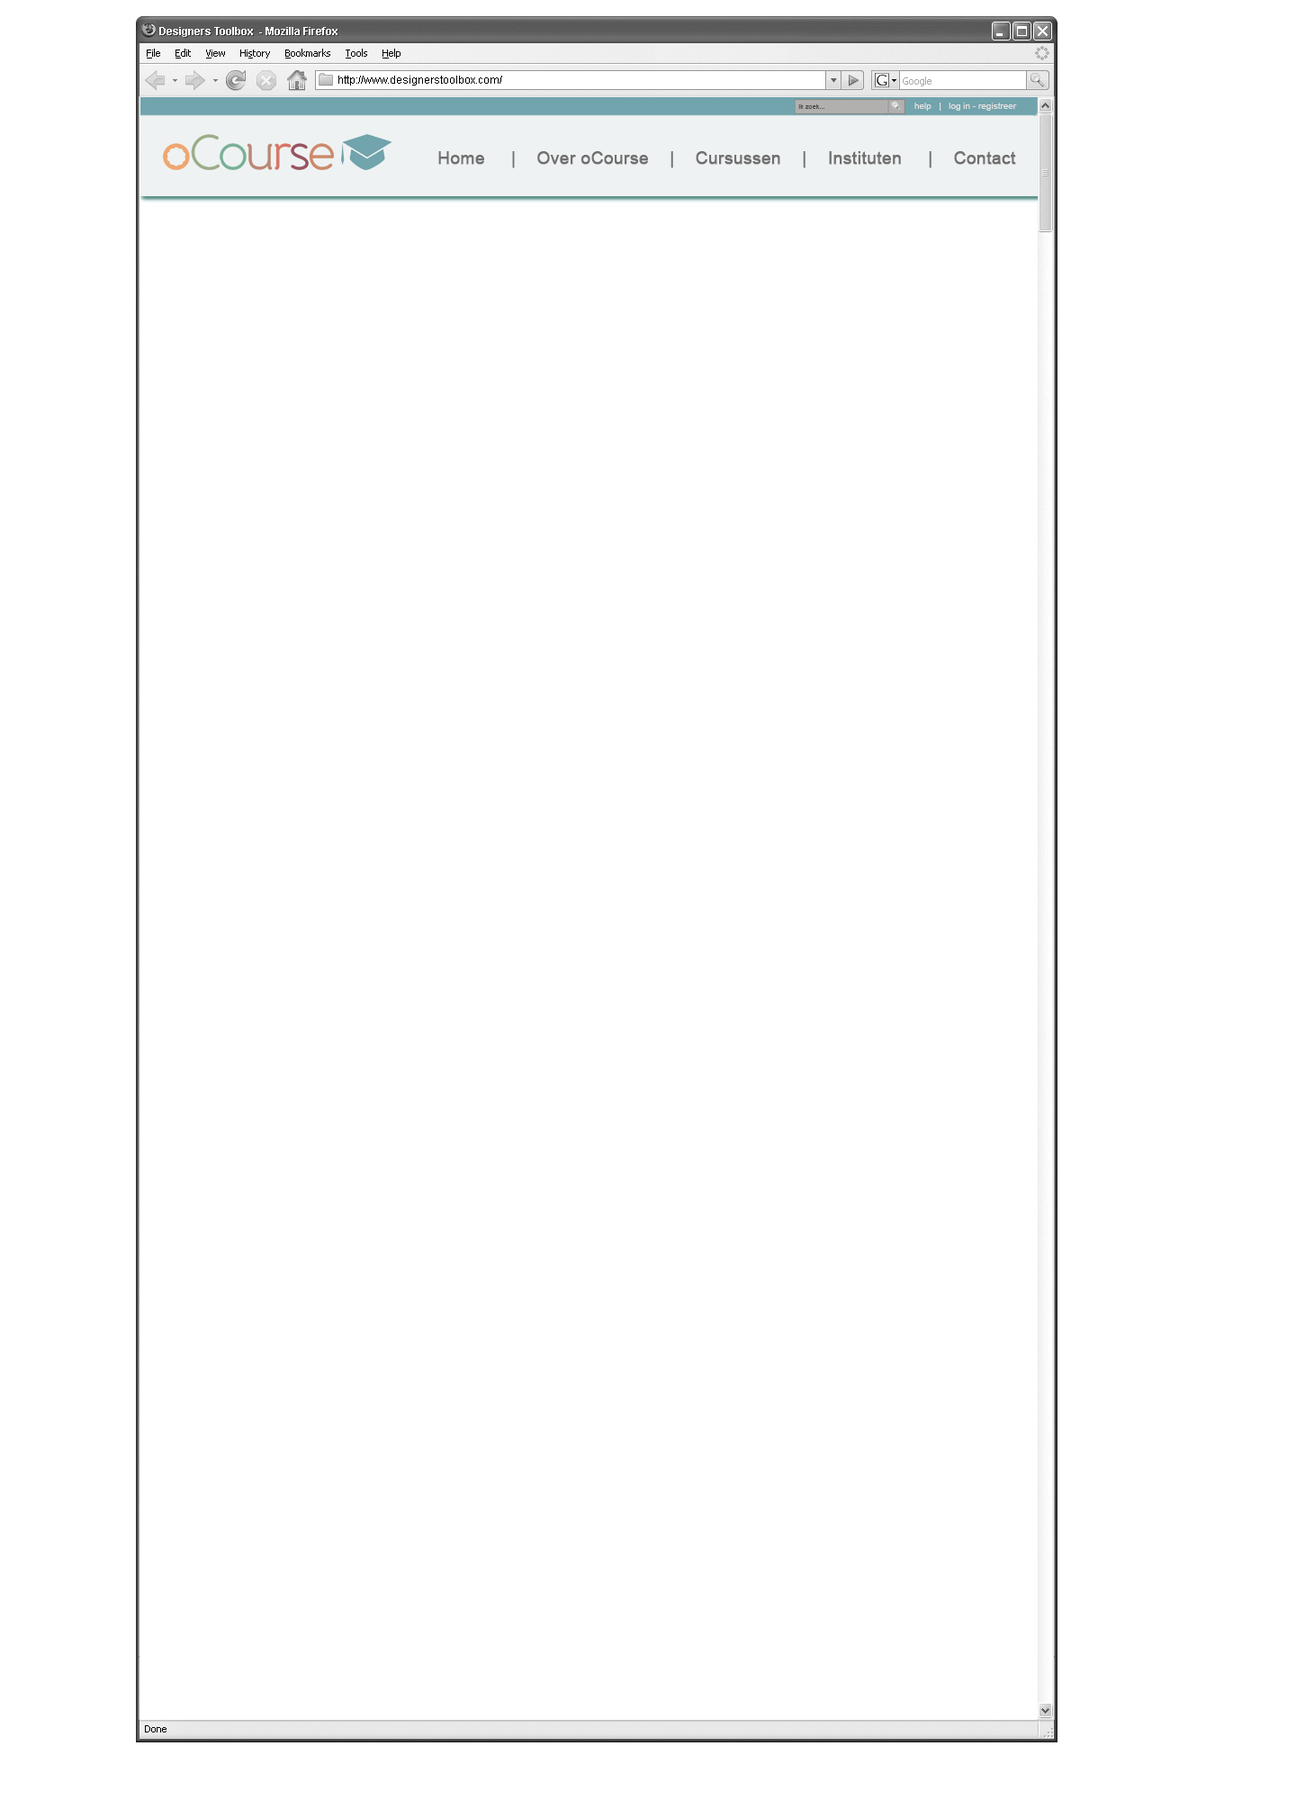
<style>
.page{position:relative;width:1305px;height:1800px;background:#ffffff}
.page>*{position:absolute;margin:0}
.t1{font:6.6px "ArialMT";color:#4d4c4c}
.t2{font:9px "ArialMT";color:#e7e2e2}
.t3{font:17.1px "ArialMT";color:#717070;font-weight:bold}
</style>
<div class="page">
<p class="t1" style="left:798px;top:104px;width:26px;height:5px">Ik zoek...</p>
<p class="t2" style="left:914px;top:103px;width:103px;height:8px">help   |   log in - registreer</p>
<p class="t3" style="left:438px;top:151px;width:578px;height:17px">Home     |    Over oCourse    |    Cursussen    |    Instituten     |    Contact</p>
</div>
